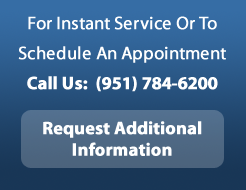
<style>
.page{position:relative;width:246px;height:190px}
.page>*{position:absolute;margin:0}
.t1{font:18px/30px "MyriadPro-Regular";color:#ffffff;font-weight:bold}
.t2{font:18px/30px "MyriadPro-Bold";color:#ffffff;font-weight:bold}
.t3{font:18px "MyriadPro-Bold";color:#ffffff;font-weight:bold}
</style>
<div class="page">
<p class="t1" style="left:18px;top:16px;width:208px;height:76px;text-align:center">For Instant Service Or To<br>Schedule An Appointment<br><span class="t2">Call Us:  (951) 784-6200</span></p>
<p class="t3" style="left:43px;top:121px;width:159px;height:35px;text-align:center">Request Additional<br>Information</p>
</div>
